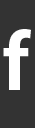
<style>
.page{position:relative;width:35px;height:128px;background:#333333}
.page>*{position:absolute;margin:0}
.t1{font:75px "AdobeGothicStd-Bold";color:#ffffff}
</style>
<div class="page">
<p class="t1" style="left:3px;top:29px;width:28px;height:61px">f</p>
</div>
